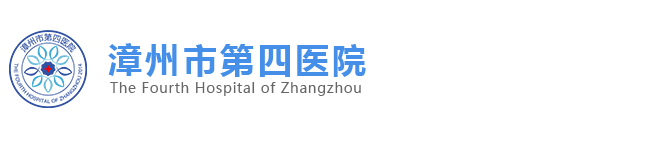
<style>
.page{position:relative;width:646px;height:141px;background:#ffffff}
.page>*{position:absolute;margin:0}
.t1{font:34px "MicrosoftYaHei-Bold";letter-spacing:0.1em;color:#458fe8}
.t2{font:14px "MicrosoftYaHei";letter-spacing:0.05em;color:#666666}
</style>
<div class="page">
<p class="t1" style="left:108px;top:43px;width:258px;height:34px">漳州市第四医院</p>
<p class="t2" style="left:110px;top:82px;width:251px;height:14px">The Fourth Hospital of Zhangzhou</p>
</div>
